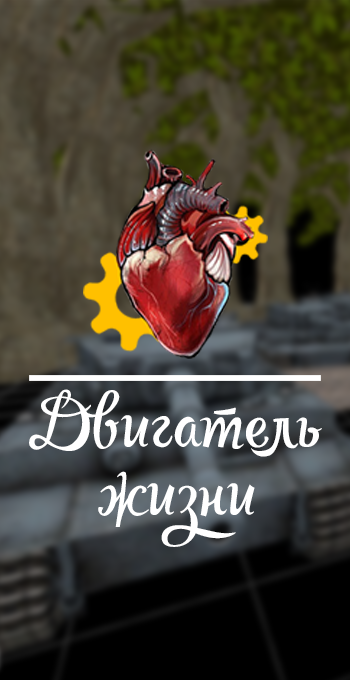
<style>
.page{position:relative;width:350px;height:680px}
.page>*{position:absolute;margin:0}
.t1{font:57px "RupsterScriptFree";color:#ffffff}
</style>
<div class="page">
<p class="t1" style="left:29px;top:389px;width:293px;height:158px;text-align:center">Двигатель<br>жизни</p>
</div>
